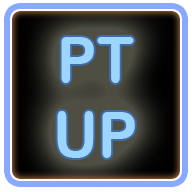
<style>
.page{position:relative;width:192px;height:192px}
.page>*{position:absolute;margin:0}
.t1{font:62.5px "ArialRoundedMTBold";color:#9cd6ff;scale:0.95 1}
</style>
<div class="page">
<p class="t1" style="left:57px;top:37px;width:78px;height:121px;text-align:center">PT<br>UP</p>
</div>
